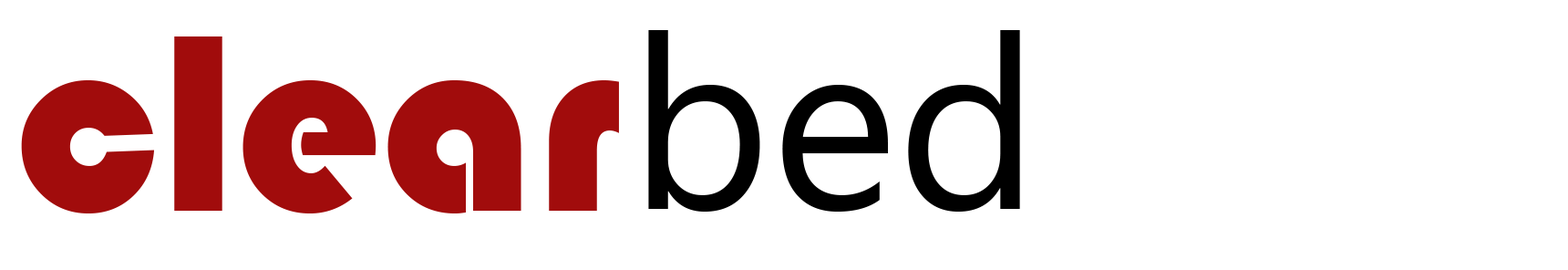
<style>
.page{position:relative;width:1568px;height:270px;background:#ffffff}
.page>*{position:absolute;margin:0}
.t1{font:261.7px "Bauhaus93";color:#a10c0c}
.t2{font:241.5px "Gadugi";color:#000000}
</style>
<div class="page">
<p class="t1" style="left:21px;top:36px;width:598px;height:177px">clear</p>
<p class="t2" style="left:648px;top:30px;width:372px;height:181px">bed</p>
</div>
